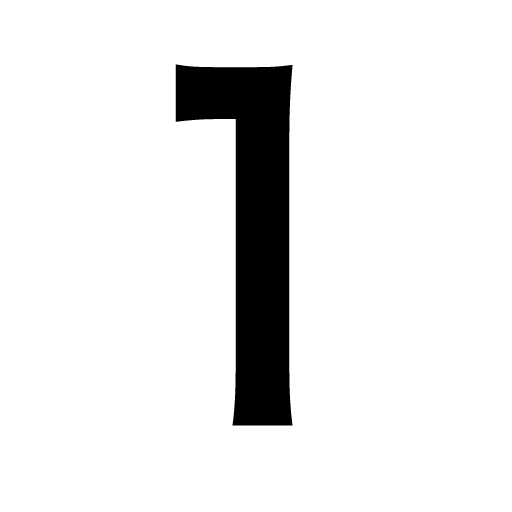
<style>
.page{position:relative;width:512px;height:512px;background:#ffffff}
.page>*{position:absolute;margin:0}
.t1{font:450px "HiraKakuPro-W6";color:#000000;scale:0.88 1}
</style>
<div class="page">
<p class="t1" style="left:175px;top:64px;width:118px;height:362px">1</p>
</div>
